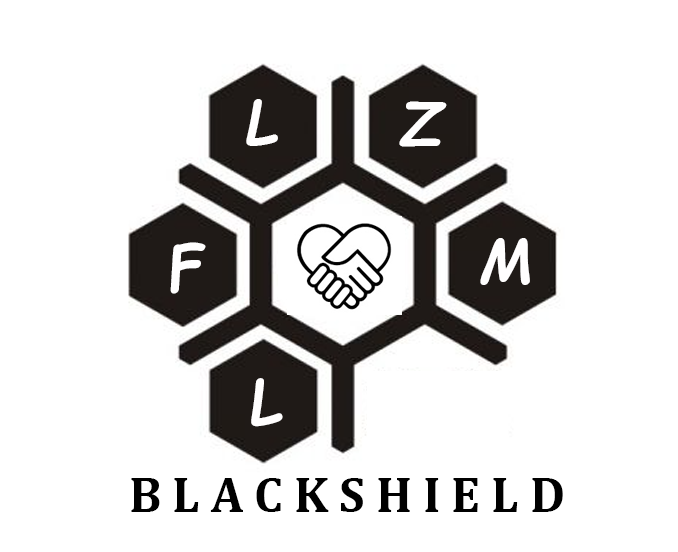
<style>
.page{position:relative;width:678px;height:552px;background:#ffffff}
.page>*{position:absolute;margin:0}
.t1{font:60px "ComicSansMS-BoldItalic";color:#fffefe}
.t2{font:50px "Cambria-Bold";letter-spacing:0.22em;color:#000000}
</style>
<div class="page">
<p class="t1" style="left:246px;top:99px;width:32px;height:47px">L</p>
<p class="t1" style="left:399px;top:101px;width:48px;height:46px">Z</p>
<p class="t1" style="left:170px;top:242px;width:36px;height:52px;rotate:-5deg">F</p>
<p class="t1" style="left:480px;top:238px;width:50px;height:47px">M</p>
<p class="t1" style="left:251px;top:378px;width:32px;height:49px;rotate:-4deg">L</p>
<p class="t2" style="left:131px;top:478px;width:432px;height:34px">BLACKSHIELD</p>
</div>
